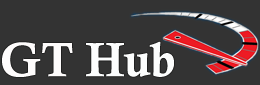
<style>
.page{position:relative;width:260px;height:85px;background:#333333}
.page>*{position:absolute;margin:0}
.t1{font:48px "CalisMTBol";color:#fcfdfd}
.t2{font:48px "CalisMTBol";color:#fefcfc}
</style>
<div class="page">
<p class="t1" style="left:2px;top:41px;width:172px;height:36px"><span class="t2">GT</span> Hub</p>
</div>
